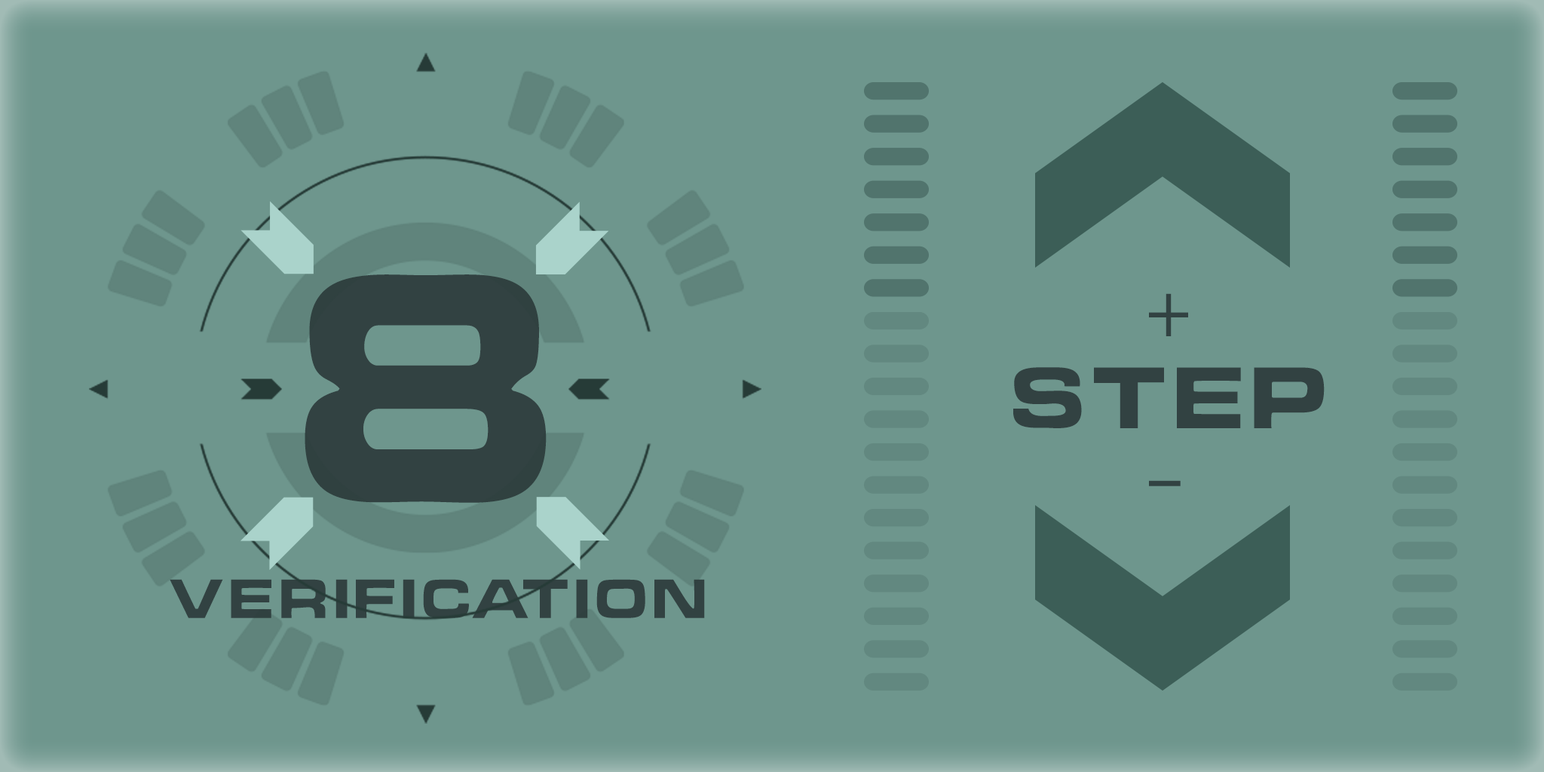
<style>
.page{position:relative;width:1544px;height:772px;background:#6e968d}
.page>*{position:absolute;margin:0}
.t1{font:296.6px "ChinoCapsSSK";letter-spacing:0.12em;color:#324242;scale:0.95 1}
.t2{font:79.6px "MyriadPro-Regular";letter-spacing:0.12em;color:#324242;scale:0.95 1}
.t3{font:79.6px "ChinoCapsSSK";letter-spacing:0.12em;color:#324242;scale:0.95 1}
.t4{font:79.6px "MyriadPro-Regular";letter-spacing:0.12em;color:#324242;scale:1.6 1}
.t5{font:50.4px "ChinoCapsSSK";letter-spacing:0.12em;color:#324242;scale:0.95 1}
</style>
<div class="page">
<p class="t1" style="left:305px;top:274px;width:242px;height:229px">8</p>
<p class="t2" style="left:1149px;top:293px;width:39px;height:43px">+</p>
<p class="t3" style="left:1013px;top:367px;width:312px;height:62px">step</p>
<p class="t4" style="left:1149px;top:480px;width:32px;height:6px">-</p>
<p class="t5" style="left:170px;top:579px;width:535px;height:39px">verification</p>
</div>
